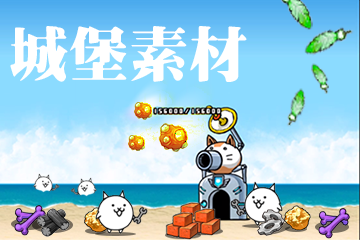
<style>
.page{position:relative;width:360px;height:240px}
.page>*{position:absolute;margin:0}
.t1{font:60.2px "HanWangMingBlack";color:#ffffff}
</style>
<div class="page">
<p class="t1" style="left:10px;top:26px;width:237px;height:56px">城堡素材</p>
</div>
